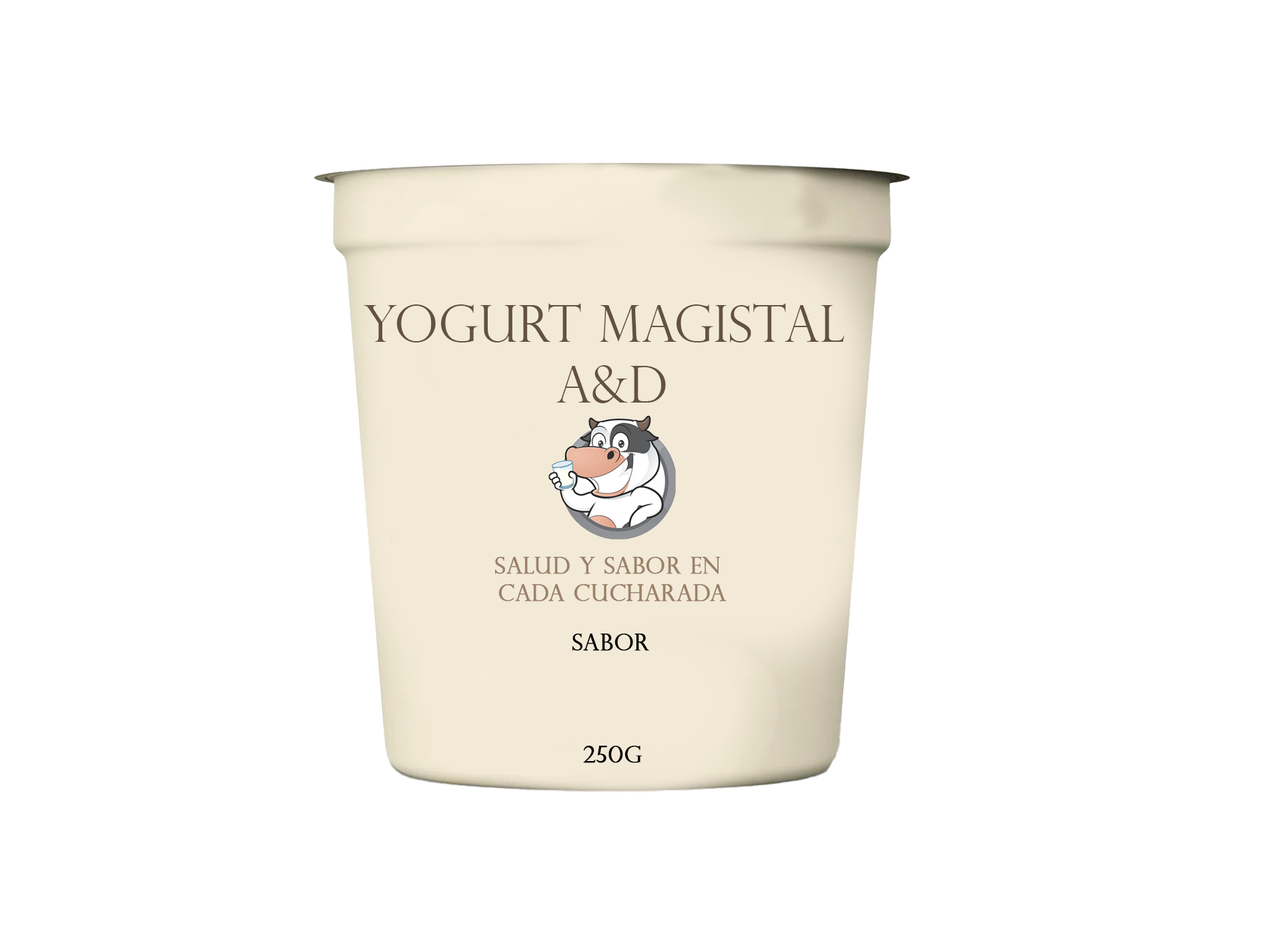
<style>
.page{position:relative;width:1261px;height:946px;background:#ffffff}
.page>*{position:absolute;margin:0}
.t1{font:50.8px "PerpetuaTitlingMT-Light";color:#635141}
.t2{font:22.9px "PerpetuaTitlingMT-Light";color:#9b816a;font-weight:bold}
.t3{font:22.9px "PerpetuaTitlingMT-Light";color:#000000;font-weight:bold}
</style>
<div class="page">
<p class="t1" style="left:363px;top:303px;width:482px;height:100px;text-align:center">Yogurt Magistal <br>A&amp;D</p>
<p class="t2" style="left:495px;top:557px;width:231px;height:44px;text-align:center">salud y sabor en <br>cada cucharada</p>
<p class="t3" style="left:573px;top:633px;width:77px;height:18px">SABOR</p>
<p class="t3" style="left:583px;top:745px;width:60px;height:18px">250g</p>
</div>
